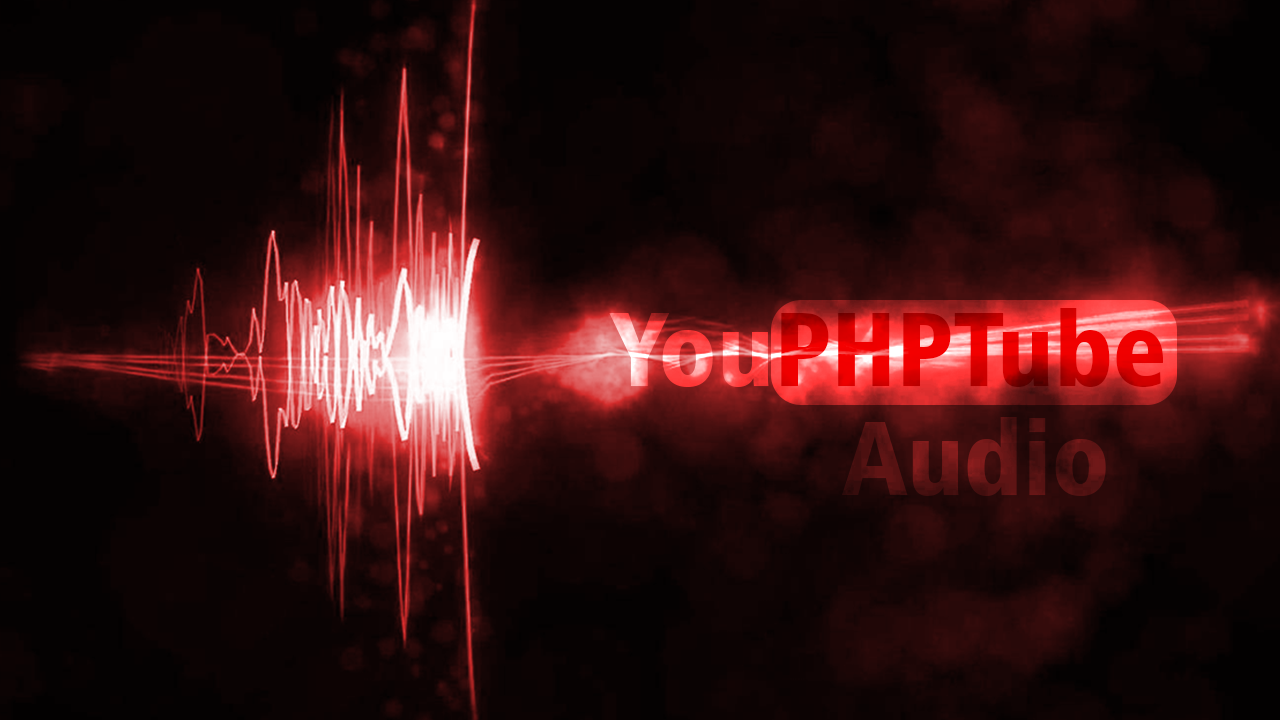
<style>
.page{position:relative;width:1280px;height:720px}
.page>*{position:absolute;margin:0}
.t1{font:104.6px "Humanist777BT-BlackCondensedB"}
.t2{font:104.6px "Humanist777BT-BlackCondensedB";color:#561212}
</style>
<div class="page">
<p class="t1" style="left:609px;top:308px;width:554px;height:79px">YouPHPTube</p>
<p class="t2" style="left:842px;top:417px;width:264px;height:79px">Audio</p>
</div>
